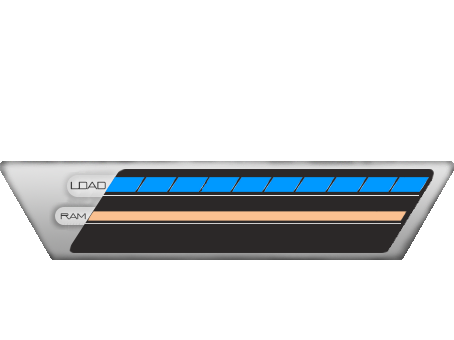
<style>
.page{position:relative;width:454px;height:340px;background:#ffffff}
.page>*{position:absolute;margin:0}
.t1{font:10px "TimeNSpace";color:#3f3f3f}
.t2{font:8px "TimeNSpace";color:#3f3f3f}
</style>
<div class="page">
<p class="t1" style="left:70px;top:181px;width:36px;height:9px">LDAD</p>
<p class="t2" style="left:60px;top:213px;width:26px;height:7px">RAM</p>
</div>
